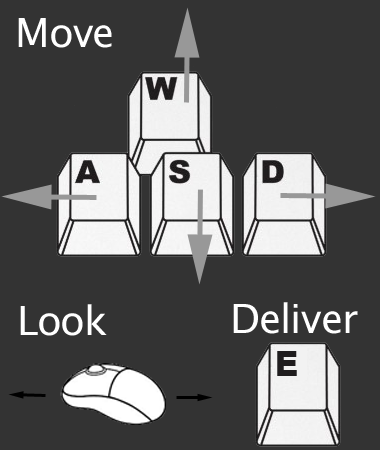
<style>
.page{position:relative;width:380px;height:450px;background:#333333}
.page>*{position:absolute;margin:0}
.t1{font:40px "LucidaSansUnicode";letter-spacing:-0.025em;color:#ffffff}
</style>
<div class="page">
<p class="t1" style="left:18px;top:18px;width:94px;height:30px">Move</p>
<p class="t1" style="left:20px;top:304px;width:87px;height:32px">Look</p>
<p class="t1" style="left:233px;top:302px;width:125px;height:32px">Deliver</p>
</div>
